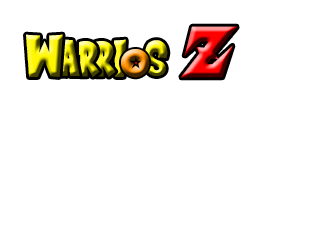
<style>
.page{position:relative;width:320px;height:240px;background:#ffffff}
.page>*{position:absolute;margin:0}
.t1{font:72px "SaiyanSans"}
.t2{font:60px "SaiyanSans"}
</style>
<div class="page">
<p class="t1" style="left:181px;top:26px;width:56px;height:52px">Z</p>
<p class="t2" style="left:26px;top:34px;width:37px;height:43px">W</p>
<p class="t2" style="left:58px;top:39px;width:22px;height:37px">a</p>
<p class="t2" style="left:79px;top:41px;width:21px;height:36px">r</p>
<p class="t2" style="left:95px;top:41px;width:21px;height:36px">r</p>
<p class="t2" style="left:114px;top:39px;width:12px;height:38px">i</p>
<p class="t2" style="left:145px;top:40px;width:23px;height:36px">s</p>
<p class="t1" style="left:121px;top:49px;width:29px;height:29px">o</p>
</div>
